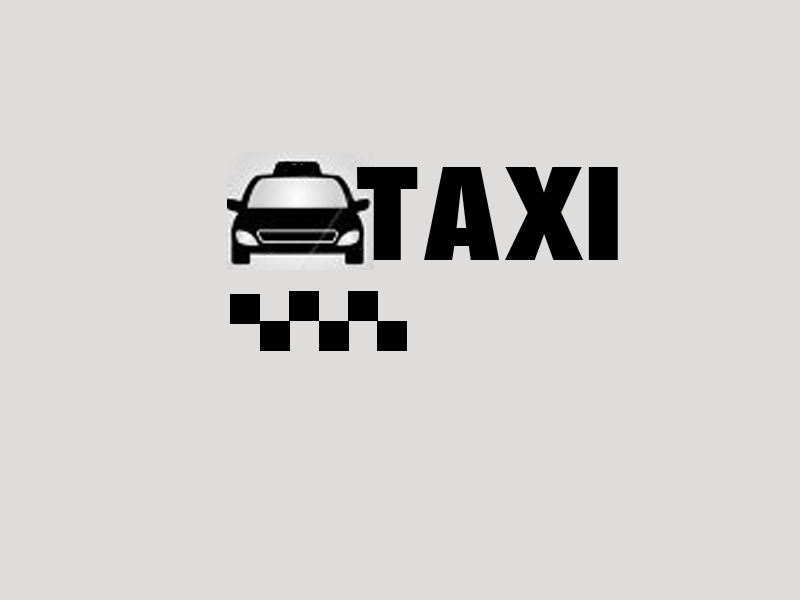
<style>
.page{position:relative;width:800px;height:600px;background:#dfdcdc}
.page>*{position:absolute;margin:0}
.t1{font:125.1px "Dakota";color:#000000;scale:0.77 1}
</style>
<div class="page">
<p class="t1" style="left:357px;top:167px;width:261px;height:93px">TAXI</p>
</div>
